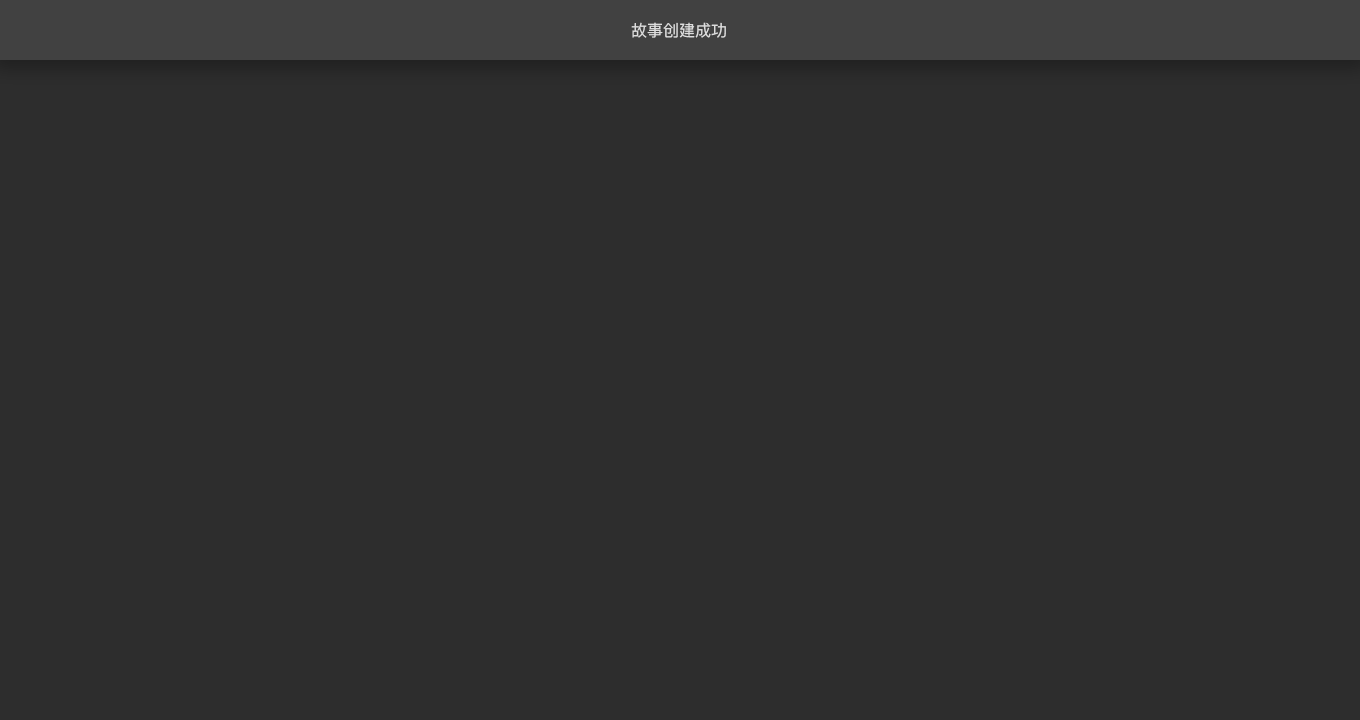
<style>
.page{position:relative;width:1360px;height:720px;background:#2d2d2d}
.page>*{position:absolute;margin:0}
.t1{font:16px "PingFangSC-Regular";color:#dcdcdc}
</style>
<div class="page">
<p class="t1" style="left:631px;top:22px;width:95px;height:16px">故事创建成功</p>
</div>
